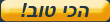
<style>
.page{position:relative;width:110px;height:22px;background:#eb9b09}
.page>*{position:absolute;margin:0}
.t1{font:18.9px "Arial-BoldItalicMT";color:#233645;scale:1.06 1}
</style>
<div class="page">
<p class="t1" style="left:21px;top:3px;width:68px;height:14px">!בוט יכה</p>
</div>
